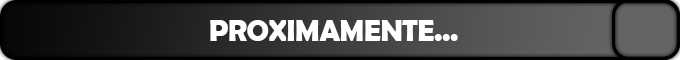
<style>
.page{position:relative;width:680px;height:60px}
.page>*{position:absolute;margin:0}
.t1{font:30px "BerlinSansFBDemi-Bold";letter-spacing:-0.015em;color:#ffffff}
</style>
<div class="page">
<p class="t1" style="left:210px;top:20px;width:248px;height:21px">PROXIMAMENTE...</p>
</div>
